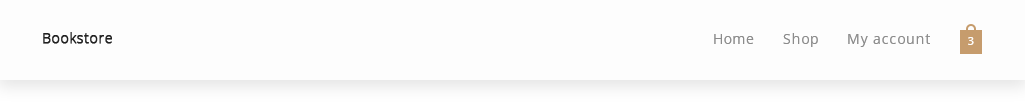
<style>
.page{position:relative;width:1025px;height:107px;background:#fdfdfd}
.page>*{position:absolute;margin:0}
.t1{font:14px "OpenSans-Light";letter-spacing:0.05em;color:#212121;font-weight:bold}
.t2{font:14px "OpenSans";letter-spacing:0.05em;color:#8c8c8c}
.t3{font:11px "OpenSans-Semibold";letter-spacing:0.05em;color:#fefdfd}
</style>
<div class="page">
<p class="t1" style="left:43px;top:32px;width:69px;height:12px">Bookstore</p>
<p class="t2" style="left:714px;top:34px;width:40px;height:10px">Home</p>
<p class="t2" style="left:783px;top:33px;width:35px;height:14px">Shop</p>
<p class="t2" style="left:848px;top:34px;width:82px;height:13px">My account</p>
<p class="t3" style="left:968px;top:37px;width:6px;height:8px">3</p>
</div>
